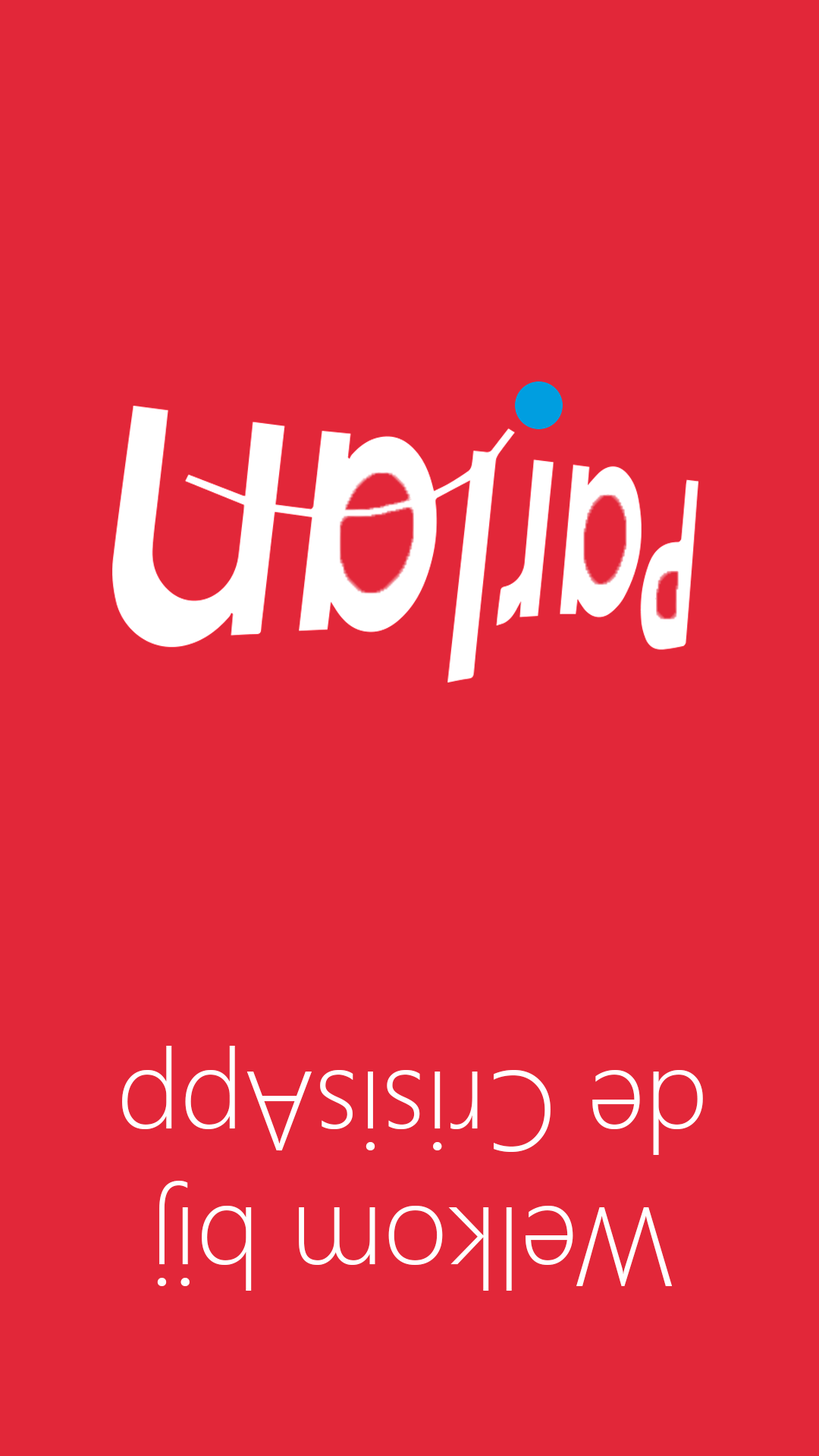
<style>
.page{position:relative;width:819px;height:1456px;background:#e22739}
.page>*{position:absolute;margin:0}
.t1{font:113px "SegoeUI-Light";color:#ffffff}
</style>
<div class="page">
<p class="t1" style="left:122px;top:1046px;width:581px;height:245px;text-align:center;rotate:180deg">Welkom bij<br>de CrisisApp</p>
</div>
